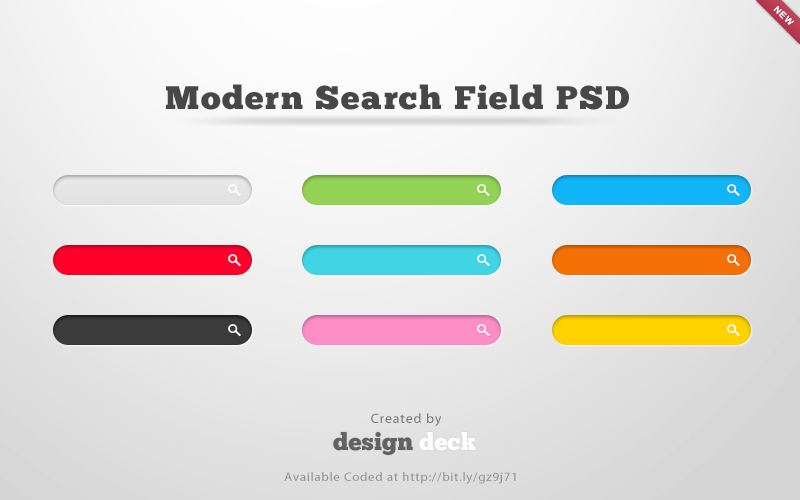
<style>
.page{position:relative;width:800px;height:500px}
.page>*{position:absolute;margin:0}
.t1{font:32.6px "ChunkFive";letter-spacing:0.055em;color:#474747;scale:1.04 1}
.t2{font:13.4px "MyriadPro-Regular";letter-spacing:0.055em;color:#787878;scale:1.04 1}
.t3{font:24px "ChunkFive";letter-spacing:0.005em;color:#626262}
.t4{font:24px "ChunkFive";letter-spacing:0.005em;color:#ffffff}
.t5{font:12.5px "MyriadPro-Regular";letter-spacing:0.055em;color:#929292;scale:1.04 1}
</style>
<div class="page">
<p class="t1" style="left:166px;top:84px;width:463px;height:26px">Modern Search Field PSD</p>
<p class="t2" style="left:371px;top:413px;width:71px;height:13px">Created by</p>
<p class="t3" style="left:333px;top:432px;width:143px;height:23px">design <span class="t4">deck</span></p>
<p class="t5" style="left:284px;top:472px;width:232px;height:12px">Available Coded at http://bit.ly/gz9j71</p>
</div>
